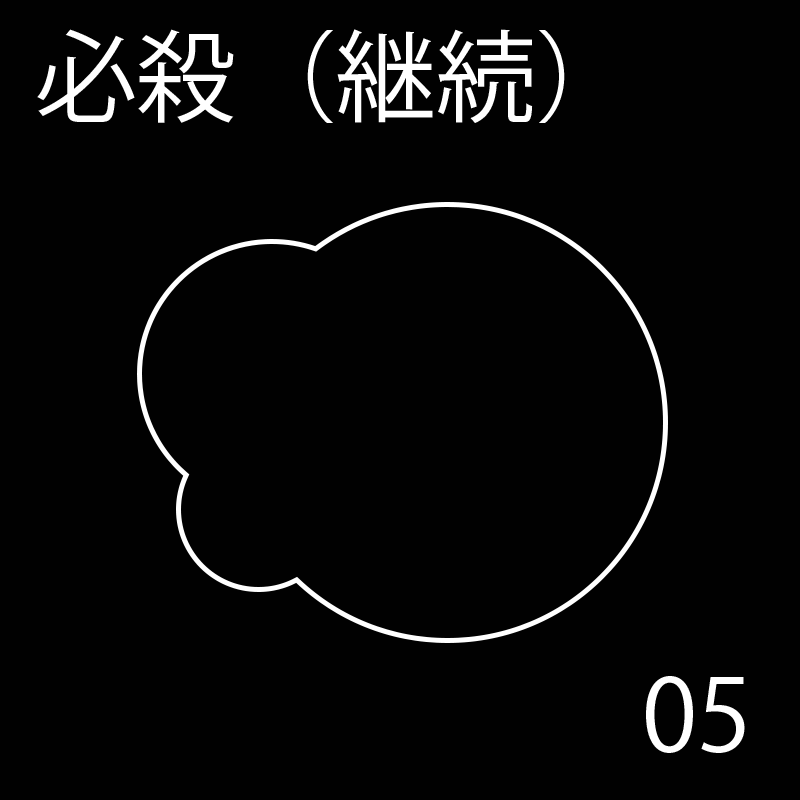
<style>
.page{position:relative;width:800px;height:800px;background:#010101}
.page>*{position:absolute;margin:0}
.t1{font:100px "KozGoPr6N-Regular";color:#ffffff}
</style>
<div class="page">
<p class="t1" style="left:37px;top:29px;width:528px;height:94px">必殺（継続）</p>
<p class="t1" style="left:37px;top:29px;width:528px;height:94px">必殺（継続）</p>
<p class="t1" style="left:37px;top:29px;width:528px;height:94px">必殺（継続）</p>
<p class="t1" style="left:37px;top:29px;width:528px;height:94px">必殺（継続）</p>
<p class="t1" style="left:37px;top:29px;width:528px;height:94px">必殺（継続）</p>
<p class="t1" style="left:37px;top:29px;width:528px;height:94px">必殺（継続）</p>
<p class="t1" style="left:646px;top:676px;width:102px;height:77px">00</p>
<p class="t1" style="left:646px;top:676px;width:85px;height:77px">01</p>
<p class="t1" style="left:646px;top:676px;width:101px;height:77px">02</p>
<p class="t1" style="left:646px;top:676px;width:99px;height:77px">03</p>
<p class="t1" style="left:646px;top:676px;width:105px;height:77px">04</p>
<p class="t1" style="left:646px;top:676px;width:99px;height:77px">05</p>
</div>
